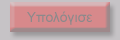
<style>
.page{position:relative;width:120px;height:40px;background:#d7898b}
.page>*{position:absolute;margin:0}
.t1{font:14px "ArialMT";color:#8b898b}
</style>
<div class="page">
<p class="t1" style="left:27px;top:11px;width:65px;height:14px">Υπολόγισε</p>
</div>
